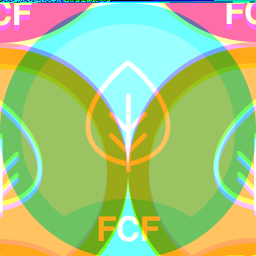
<style>
.page{position:relative;width:256px;height:256px;background:#9ac361}
.page>*{position:absolute;margin:0}
.t1{font:34px "Helvetica-Bold";letter-spacing:-0.025em}
</style>
<div class="page">
<p class="t1" style="left:98px;top:212px;width:62px;height:27px">FCF</p>
</div>
